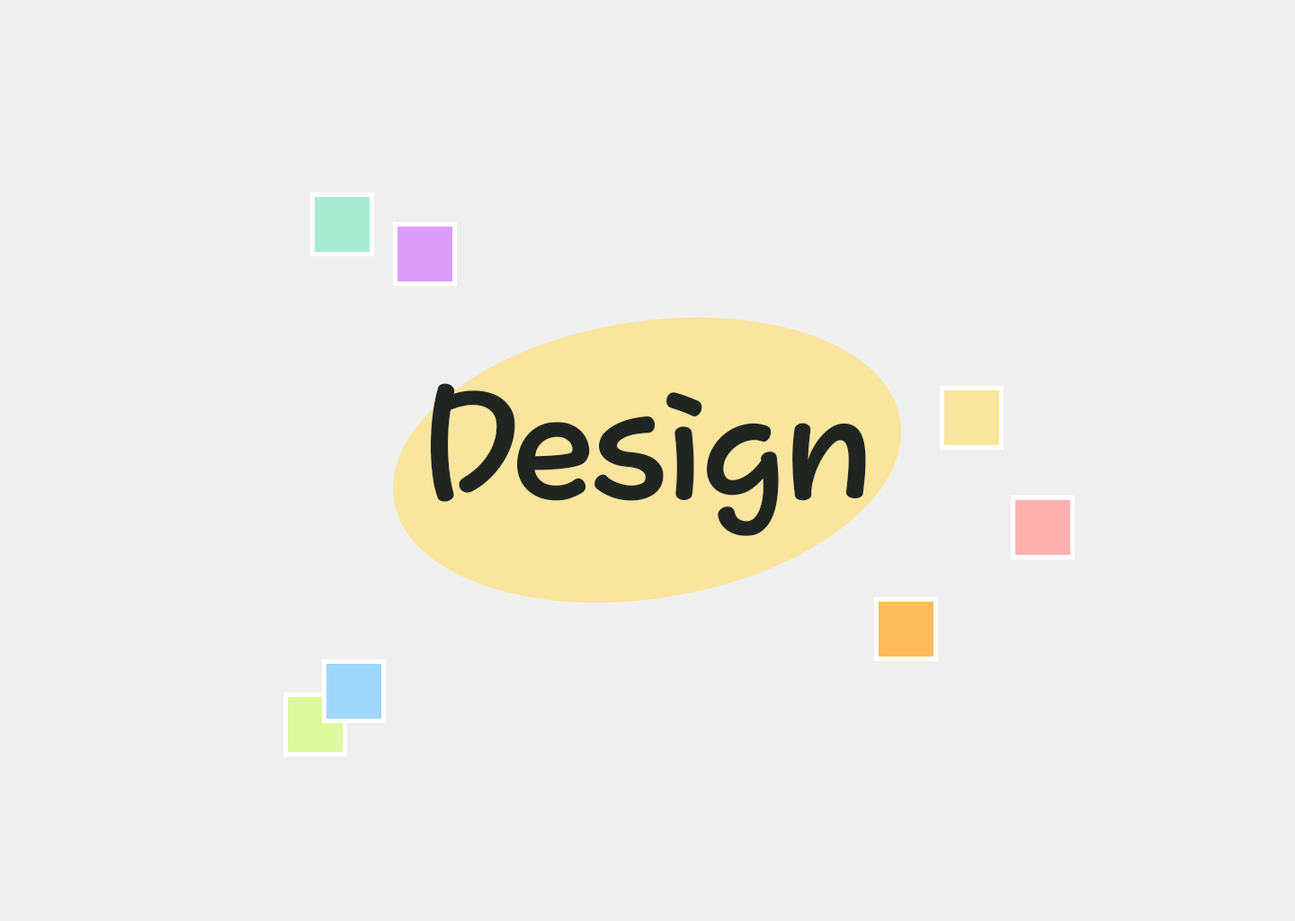
<style>
.page{position:relative;width:1295px;height:921px;background:#efefef}
.page>*{position:absolute;margin:0}
.t1{font:179.9px "BazziRegular";letter-spacing:-0.02em;color:#212522}
</style>
<div class="page">
<p class="t1" style="left:431px;top:383px;width:435px;height:153px">Design</p>
</div>
